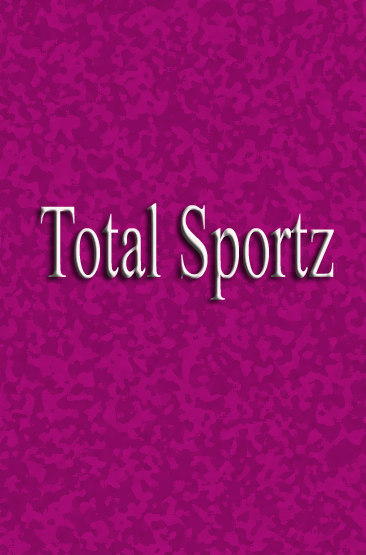
<style>
.page{position:relative;width:366px;height:555px}
.page>*{position:absolute;margin:0}
.t1{font:106.1px "TimesNewRomanPSMT";scale:0.57 1}
</style>
<div class="page">
<p class="t1" style="left:40px;top:203px;width:294px;height:97px">Total Sportz</p>
</div>
